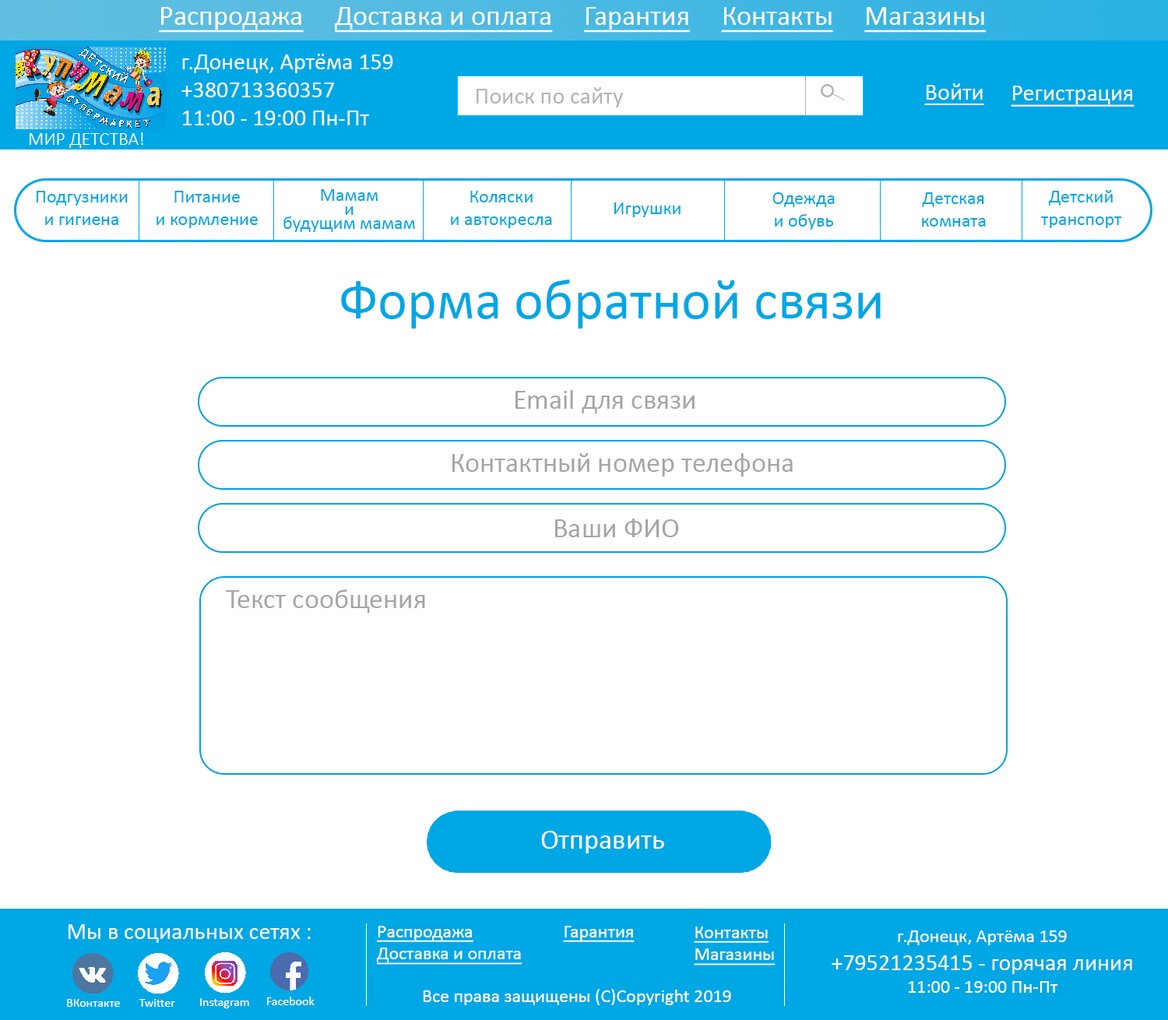
<style>
.page{position:relative;width:1168px;height:1020px;background:#ffffff}
.page>*{position:absolute;margin:0}
.t1{font:28px "Calibri";color:#ffffff;text-decoration:underline}
.t2{font:23.4px "Calibri";color:#ffffff}
.t3{font:23.4px "Calibri";color:#b3b3b3}
.t4{font:23.4px "Calibri";color:#ffffff;text-decoration:underline}
.t5{font:18.7px "Calibri-Light";color:#ffffff}
.t6{font:18.7px "Calibri";color:#00a7e5}
.t7{font:18.7px/14px "Calibri";color:#00a7e5}
.t8{font:56.1px "Calibri";color:#00a7e5}
.t9{font:28px "Calibri";color:#a5a5a5}
.t10{font:28px "Calibri";color:#ffffff}
.t11{font:18.7px "Calibri";color:#ffffff;text-decoration:underline}
.t12{font:18.7px "Calibri";color:#ffffff}
.t13{font:12.5px "Calibri";color:#ffffff}
</style>
<div class="page">
<p class="t1" style="left:159px;top:7px;width:827px;height:26px">Распродажа     Доставка и оплата     Гарантия     Контакты     Магазины</p>
<p class="t2" style="left:182px;top:54px;width:211px;height:71px">г.Донецк, Артёма 159<br>+380713360357<br>11:00 - 19:00 Пн-Пт</p>
<p class="t3" style="left:477px;top:87px;width:146px;height:21px">Поиск по сайту</p>
<p class="t4" style="left:925px;top:83px;width:60px;height:22px">Войти</p>
<p class="t4" style="left:1011px;top:86px;width:124px;height:21px">Регистрация</p>
<p class="t5" style="left:30px;top:132px;width:113px;height:16px">МИР ДЕТСТВА!</p>
<p class="t6" style="left:36px;top:191px;width:92px;height:34px;text-align:center">Подгузники<br>и гигиена</p>
<p class="t6" style="left:157px;top:191px;width:101px;height:37px;text-align:center">Питание <br>и кормление</p>
<p class="t7" style="left:284px;top:189px;width:131px;height:43px;text-align:center">Мамам<br>и <br>будущим мамам</p>
<p class="t6" style="left:451px;top:191px;width:101px;height:37px;text-align:center">Коляски<br>и автокресла</p>
<p class="t6" style="left:773px;top:192px;width:62px;height:38px;text-align:center">Одежда<br>и обувь</p>
<p class="t6" style="left:922px;top:192px;width:64px;height:35px;text-align:center">Детская<br>комната</p>
<p class="t6" style="left:1042px;top:190px;width:81px;height:38px;text-align:center">Детский<br>транспорт</p>
<p class="t6" style="left:614px;top:203px;width:67px;height:14px">Игрушки</p>
<p class="t8" style="left:341px;top:280px;width:540px;height:49px">Форма обратной связи</p>
<p class="t9" style="left:516px;top:390px;width:179px;height:24px">Email для связи</p>
<p class="t9" style="left:453px;top:453px;width:340px;height:24px">Контактный номер телефона</p>
<p class="t9" style="left:555px;top:519px;width:124px;height:19px">Ваши ФИО</p>
<p class="t9" style="left:226px;top:590px;width:199px;height:23px">Текст сообщения</p>
<p class="t10" style="left:541px;top:831px;width:123px;height:23px">Отправить</p>
<p class="t2" style="left:69px;top:925px;width:242px;height:18px">Мы в социальных сетях :</p>
<p class="t11" style="left:376px;top:926px;width:147px;height:39px">Распродажа<br>Доставка и оплата</p>
<p class="t11" style="left:563px;top:926px;width:72px;height:17px">Гарантия</p>
<p class="t11" style="left:694px;top:927px;width:82px;height:39px">Контакты<br>Магазины</p>
<p class="t2" style="left:832px;top:931px;width:301px;height:62px;text-align:center"><span class="t12">г.Донецк, Артёма 159<br></span>+79521235415 - горячая линия<br><span class="t12">11:00 - 19:00 Пн-Пт</span></p>
<p class="t12" style="left:423px;top:989px;width:308px;height:17px">Все права защищены (С)Copyright 2019</p>
<p class="t13" style="left:67px;top:999px;width:53px;height:8px">ВКонтакте</p>
<p class="t13" style="left:139px;top:999px;width:36px;height:8px">Twitter</p>
<p class="t13" style="left:200px;top:999px;width:49px;height:10px">Instagram</p>
<p class="t13" style="left:267px;top:997px;width:48px;height:9px">Facebook</p>
</div>
